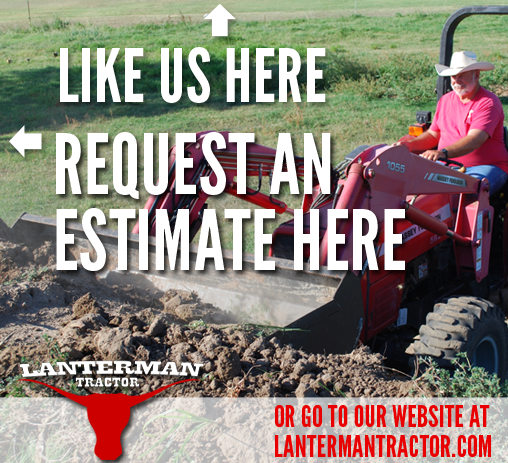
<style>
.page{position:relative;width:508px;height:463px}
.page>*{position:absolute;margin:0}
.t1{font:74px "LeagueGothic";letter-spacing:0.01em;color:#ffffff}
.t2{font:83.4px/75.8px "LeagueGothic";letter-spacing:0.01em;color:#ffffff}
.t3{font:30.1px/30.1px "LeagueGothic";letter-spacing:0.01em;color:#e90000}
</style>
<div class="page">
<p class="t1" style="left:60px;top:47px;width:266px;height:56px">LIKE US HERE</p>
<p class="t2" style="left:56px;top:132px;width:349px;height:139px">REQUEST AN<br>ESTIMATE HERE</p>
<p class="t3" style="left:275px;top:405px;width:216px;height:52px">OR GO TO OUR WEBSITE AT<br>LANTERMANTRACTOR.COM</p>
</div>
